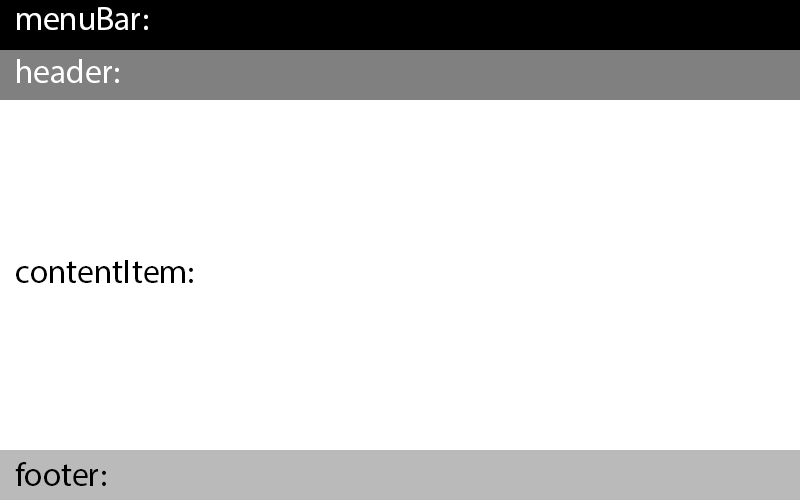
<style>
.page{position:relative;width:800px;height:500px;background:#ffffff}
.page>*{position:absolute;margin:0}
.t1{font:33.3px "MyriadPro-Regular";color:#ffffff}
.t2{font:33.3px "MyriadPro-Regular";color:#000000}
</style>
<div class="page">
<p class="t1" style="left:17px;top:7px;width:131px;height:23px">menuBar:</p>
<p class="t1" style="left:17px;top:59px;width:102px;height:24px">header:</p>
<p class="t2" style="left:16px;top:260px;width:177px;height:23px">contentItem:</p>
<p class="t2" style="left:15px;top:462px;width:91px;height:24px">footer:</p>
</div>
